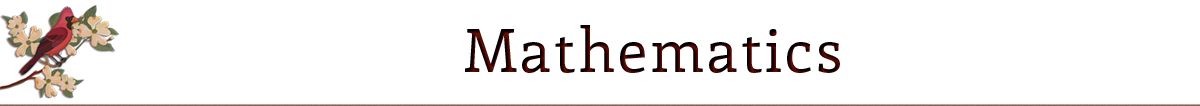
<style>
.page{position:relative;width:1200px;height:106px;background:#ffffff}
.page>*{position:absolute;margin:0}
.t1{font:60px "Enriqueta-Regular";letter-spacing:0.04em}
</style>
<div class="page">
<p class="t1" style="left:465px;top:25px;width:375px;height:48px">Mathematics</p>
</div>
